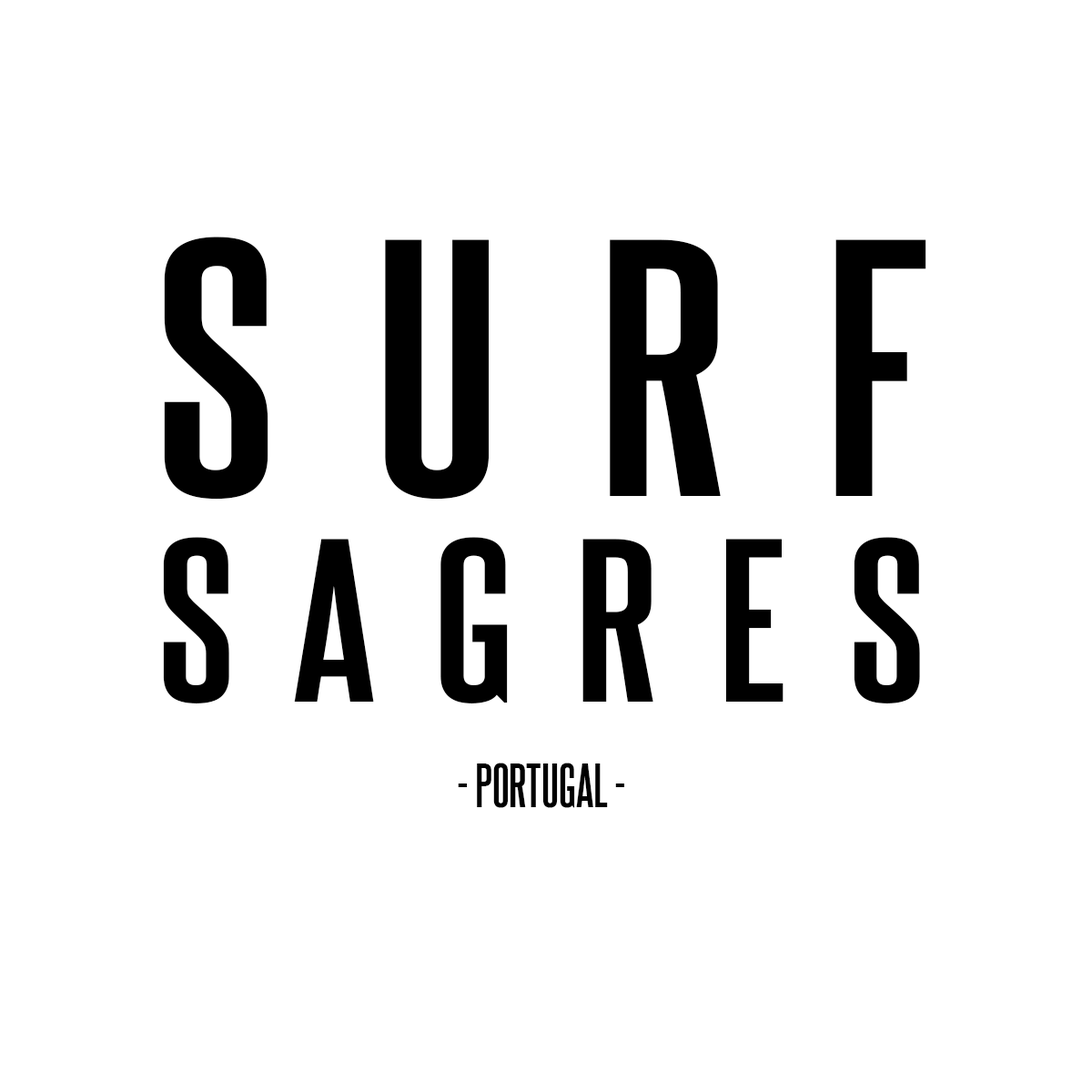
<style>
.page{position:relative;width:1092px;height:1092px;background:#ffffff}
.page>*{position:absolute;margin:0}
.t1{font:197.2px "SteelfishRg-Bold";letter-spacing:0.24em;color:#000000;scale:1.27 1}
.t2{font:310.9px "SteelfishRg-Bold";letter-spacing:0.24em;color:#000000;scale:1.27 1}
.t3{font:53.1px "SteelfishRg-Bold";color:#000000}
</style>
<div class="page">
<p class="t1" style="left:164px;top:237px;width:762px;height:263px;text-align:center"><span class="t2">SURF <br></span>SAGRES</p>
<p class="t1" style="left:163px;top:537px;width:757px;height:166px"><span class="t2"><br></span>SAGRES</p>
<p class="t3" style="left:458px;top:763px;width:166px;height:45px">- PORTUGAL -</p>
</div>
